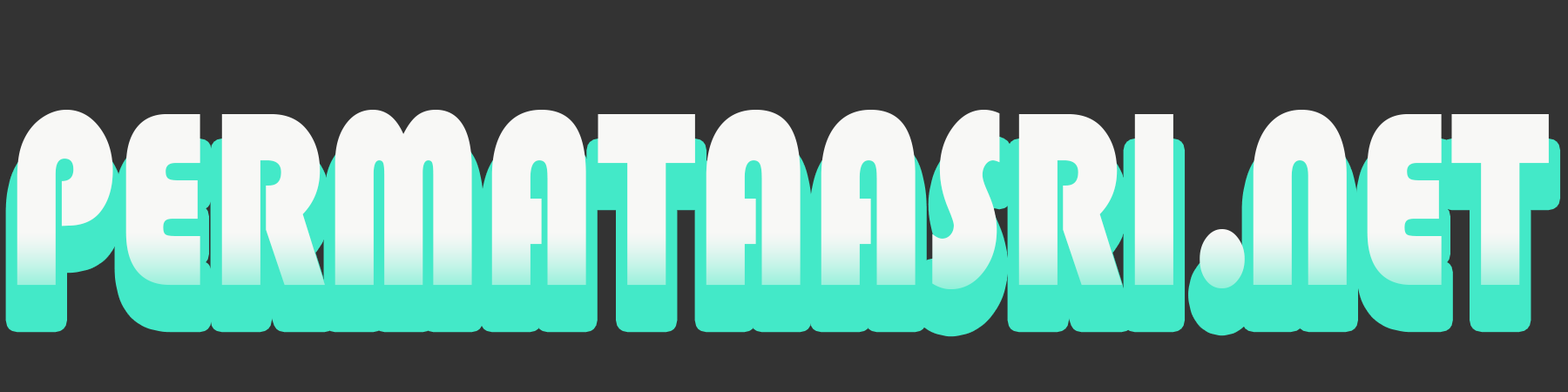
<style>
.page{position:relative;width:1568px;height:392px;background:#333333}
.page>*{position:absolute;margin:0}
.t1{font:256.2px "Bauhaus93";color:#ffffff;scale:0.76 1}
.t2{font:256.2px "Bauhaus93";letter-spacing:-0.166em;color:#ffffff;scale:0.76 1}
</style>
<div class="page">
<p class="t1" style="left:17px;top:110px;width:1532px;height:179px">PERMATAASRI<span class="t2">. </span>NET</p>
</div>
